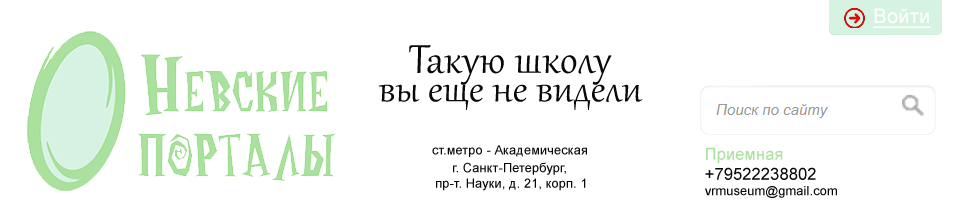
<style>
.page{position:relative;width:980px;height:222px;background:#ffffff}
.page>*{position:absolute;margin:0}
.t1{font:20.1px "ArialMT";letter-spacing:0.01em;color:#ffffff;text-decoration:underline}
.t2{font:49.4px "Gabriola";letter-spacing:0.01em;color:#07090b}
.t3{font:46.7px "Gabriola";letter-spacing:0.01em;color:#07090b}
.t4{font:13px "ArialMT";letter-spacing:0.01em;color:#07090b}
.t5{font:16.7px "ArialMT";letter-spacing:0.01em;color:#aae19e}
.t6{font:16.7px "ArialMT";letter-spacing:0.01em;color:#07090b}
</style>
<div class="page">
<p class="t1" style="left:873px;top:8px;width:58px;height:20px">Войти</p>
<p class="t2" style="left:409px;top:45px;width:203px;height:40px">Такую школу</p>
<p class="t3" style="left:378px;top:84px;width:265px;height:26px">вы еще не видели</p>
<p class="t4" style="left:432px;top:145px;width:155px;height:12px">ст.метро - Академическая</p>
<p class="t4" style="left:705px;top:147px;width:132px;height:51px"><span class="t5">Приемная<br></span><span class="t6">+79522238802<br></span>vrmuseum@gmail.com</p>
<p class="t4" style="left:436px;top:162px;width:150px;height:29px;text-align:center">г. Санкт-Петербург, <br>пр-т. Науки, д. 21, корп. 1</p>
</div>
